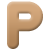
<style>
.page{position:relative;width:50px;height:50px;background:#ffffff}
.page>*{position:absolute;margin:0}
.t1{font:60.7px "Dunkin-Sans";color:#cc9966}
</style>
<div class="page">
<p class="t1" style="left:7px;top:1px;width:36px;height:48px">P</p>
</div>
